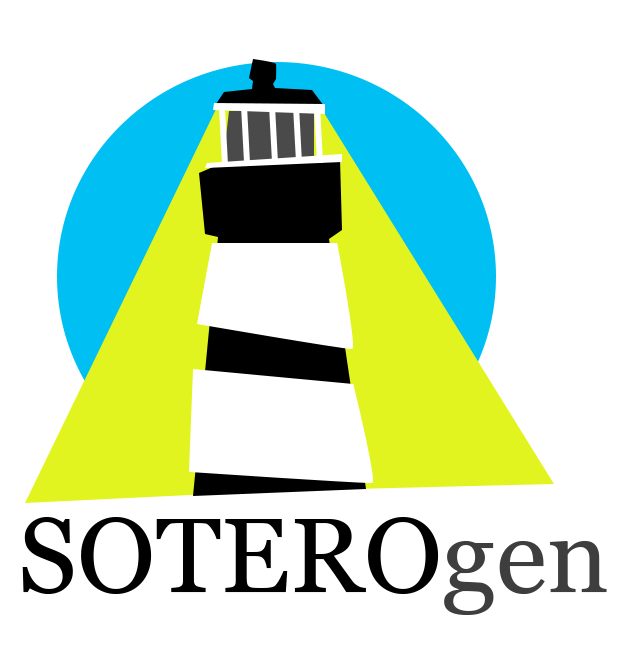
<style>
.page{position:relative;width:626px;height:646px;background:#ffffff}
.page>*{position:absolute;margin:0}
.t1{font:105.4px "Georgia";color:#000000}
.t2{font:105.4px "Georgia";color:#3e3e3e}
</style>
<div class="page">
<p class="t1" style="left:22px;top:517px;width:585px;height:98px">SOTERO<span class="t2">gen</span></p>
</div>
